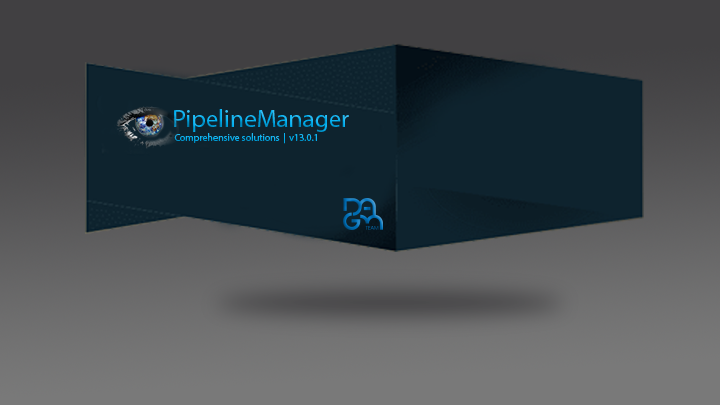
<style>
.page{position:relative;width:720px;height:405px;background:#0e232e}
.page>*{position:absolute;margin:0}
.t1{font:25px "MyriadPro-Regular"}
.t2{font:10px "MyriadPro-Regular"}
.t3{font:10px "MyriadPro-Regular";color:#00aeef}
</style>
<div class="page">
<p class="t1" style="left:174px;top:109px;width:175px;height:23px">PipelineManager</p>
<p class="t2" style="left:174px;top:133px;width:106px;height:10px">Comprehensive solutions</p>
<p class="t3" style="left:284px;top:133px;width:1px;height:11px">|</p>
<p class="t3" style="left:289px;top:134px;width:28px;height:7px">v13.0.1</p>
</div>
